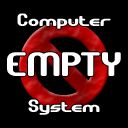
<style>
.page{position:relative;width:128px;height:128px;background:#000000}
.page>*{position:absolute;margin:0}
.t1{font:18px "GravitateBRK";color:#ffffff}
.t2{font:34px "GravitateBRK";color:#ffffff}
</style>
<div class="page">
<p class="t1" style="left:17px;top:13px;width:94px;height:16px">Computer</p>
<p class="t2" style="left:7px;top:52px;width:114px;height:24px">EMPTY</p>
<p class="t1" style="left:28px;top:99px;width:72px;height:16px">System</p>
</div>
